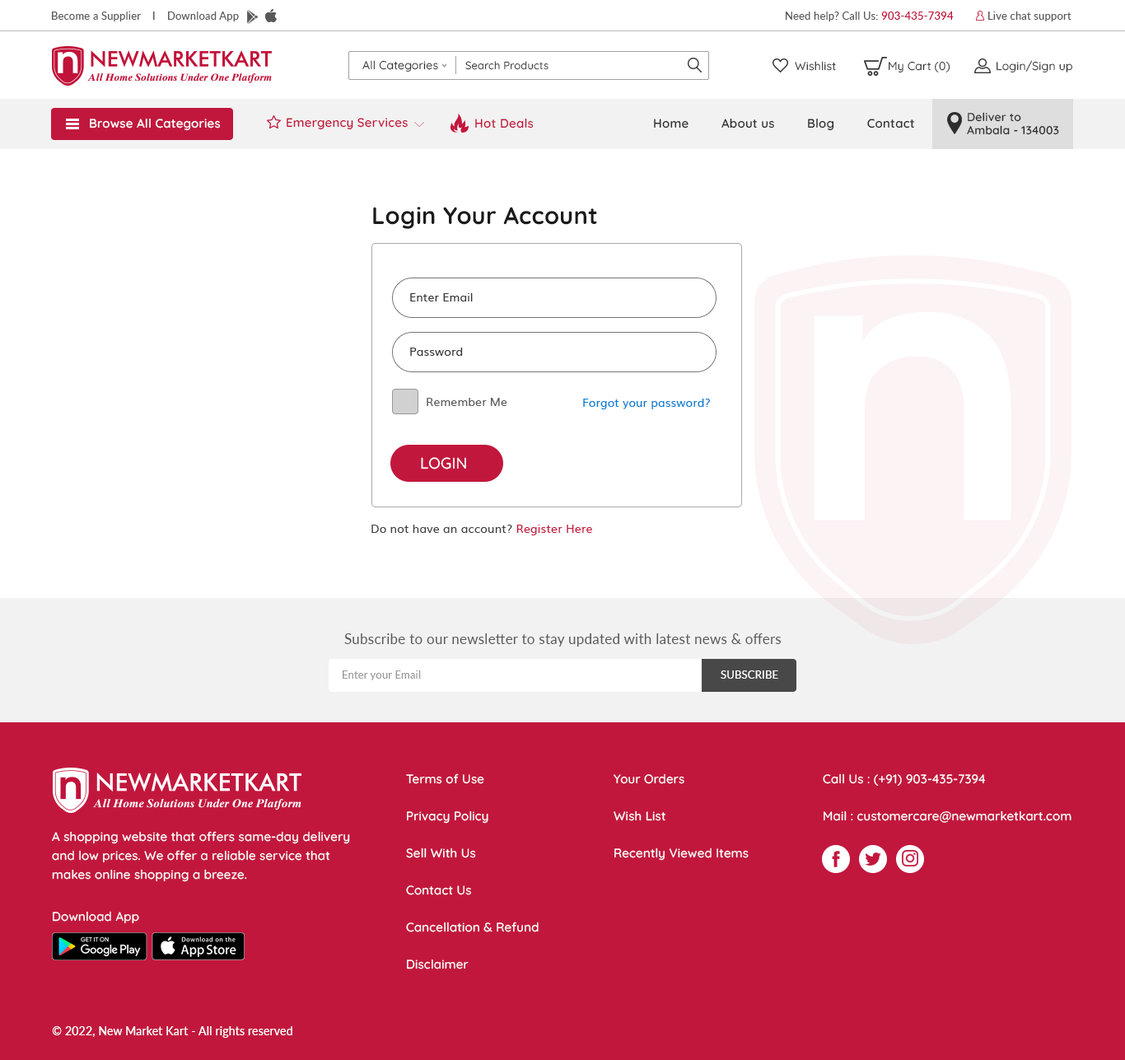
<style>
.page{position:relative;width:1125px;height:1060px;background:#ffffff}
.page>*{position:absolute;margin:0}
.t1{font:10.7px "Lato-Regular";letter-spacing:0.015em;color:#595959}
.t2{font:10.7px "Lato-Medium";letter-spacing:0.015em;color:#c11239}
.t3{font:11.5px "Quicksand-Regular";letter-spacing:0.015em;color:#333333}
.t4{font:10.7px "Quicksand-Regular";letter-spacing:0.015em;color:#333333}
.t5{font:11.5px "Quicksand-Regular";letter-spacing:0.015em;color:#323232}
.t6{font:11.5px/13.2px "Quicksand-SemiBold";letter-spacing:0.01em;color:#2d2d2d}
.t7{font:12.4px "Quicksand-SemiBold";letter-spacing:0.015em;color:#ffffff}
.t8{font:12.4px "Quicksand-SemiBold";letter-spacing:0.015em;color:#c2173d}
.t9{font:12.4px "Quicksand-SemiBold";letter-spacing:0.015em;color:#2d2d2d}
.t10{font:23.9px "Quicksand-Bold";letter-spacing:0.01em;color:#1b1b1b}
.t11{font:11.5px "Muli";letter-spacing:0.005em;color:#363636}
.t12{font:11.5px "Muli";letter-spacing:0.005em;color:#5b5b5b}
.t13{font:11.5px "Muli";letter-spacing:0.005em;color:#007dd4}
.t14{font:15.6px "Quicksand-Medium";letter-spacing:0.01em;color:#ffffff}
.t15{font:11.5px "Muli";letter-spacing:0.01em;color:#3f3f3f}
.t16{font:11.5px "Muli";letter-spacing:0.01em;color:#c2173d}
.t17{font:14px "Lato-Regular";letter-spacing:0.015em;color:#595959}
.t18{font:10.7px "Lato-Regular";letter-spacing:0.015em;color:#9c9c9c}
.t19{font:10.7px "Lato-Regular";letter-spacing:0.015em;color:#ffffff}
.t20{font:12.4px/37.1px "Quicksand-Medium";letter-spacing:0.015em;color:#ffffff}
.t21{font:12.4px/18.9px "Quicksand-Medium";letter-spacing:0.015em;color:#ffffff}
.t22{font:12.4px "Quicksand-Medium";letter-spacing:0.015em;color:#ffffff}
.t23{font:11.5px "Lato-Regular";letter-spacing:0.015em;color:#ffffff}
</style>
<div class="page">
<p class="t1" style="left:52px;top:12px;width:187px;height:9px">Become a Supplier    I    Download App</p>
<p class="t1" style="left:786px;top:12px;width:168px;height:9px">Need help? Call Us: <span class="t2">903-435-7394</span></p>
<p class="t1" style="left:988px;top:12px;width:83px;height:9px">Live chat support</p>
<p class="t3" style="left:362px;top:60px;width:76px;height:12px">All Categories</p>
<p class="t4" style="left:465px;top:61px;width:83px;height:9px">Search Products</p>
<p class="t5" style="left:795px;top:61px;width:41px;height:10px">Wishlist</p>
<p class="t5" style="left:889px;top:61px;width:61px;height:11px">My Cart (0)</p>
<p class="t5" style="left:997px;top:60px;width:75px;height:12px">Login/Sign up</p>
<p class="t6" style="left:967px;top:112px;width:92px;height:23px">Deliver to<br>Ambala - 134003</p>
<p class="t7" style="left:90px;top:119px;width:131px;height:12px">Browse All Categories</p>
<p class="t8" style="left:287px;top:118px;width:121px;height:12px">Emergency Services</p>
<p class="t8" style="left:475px;top:118px;width:59px;height:10px">Hot Deals</p>
<p class="t9" style="left:654px;top:118px;width:260px;height:13px">Home         About us         Blog         Contact</p>
<p class="t10" style="left:373px;top:207px;width:224px;height:22px">Login Your Account</p>
<p class="t11" style="left:410px;top:293px;width:63px;height:8px">Enter Email</p>
<p class="t11" style="left:410px;top:348px;width:53px;height:8px">Password</p>
<p class="t12" style="left:427px;top:398px;width:80px;height:8px">Remember Me</p>
<p class="t13" style="left:583px;top:399px;width:127px;height:10px">Forgot your password?</p>
<p class="t14" style="left:421px;top:457px;width:45px;height:12px">LOGIN</p>
<p class="t15" style="left:371px;top:525px;width:221px;height:10px">Do not have an account? <span class="t16">Register Here</span></p>
<p class="t17" style="left:344px;top:633px;width:437px;height:14px">Subscribe to our newsletter to stay updated with latest news &amp; offers</p>
<p class="t18" style="left:343px;top:670px;width:78px;height:10px">Enter your Email</p>
<p class="t19" style="left:721px;top:670px;width:57px;height:9px">SUBSCRIBE</p>
<p class="t20" style="left:406px;top:773px;width:133px;height:196px">Terms of Use<br>Privacy Policy<br>Sell With Us<br>Contact Us<br>Cancellation &amp; Refund <br>Disclaimer</p>
<p class="t20" style="left:614px;top:773px;width:135px;height:88px">Your Orders<br>Wish List<br>Recently Viewed Items</p>
<p class="t20" style="left:823px;top:773px;width:248px;height:50px">Call Us : (+91) 903-435-7394<br>Mail : customercare@newmarketkart.com</p>
<p class="t21" style="left:52px;top:831px;width:298px;height:51px">A shopping website that offers same-day delivery and low prices. We offer a reliable service that makes online shopping a breeze.</p>
<p class="t22" style="left:53px;top:911px;width:86px;height:13px">Download App</p>
<p class="t23" style="left:52px;top:1026px;width:240px;height:12px">© 2022, New Market Kart - All rights reserved</p>
</div>
